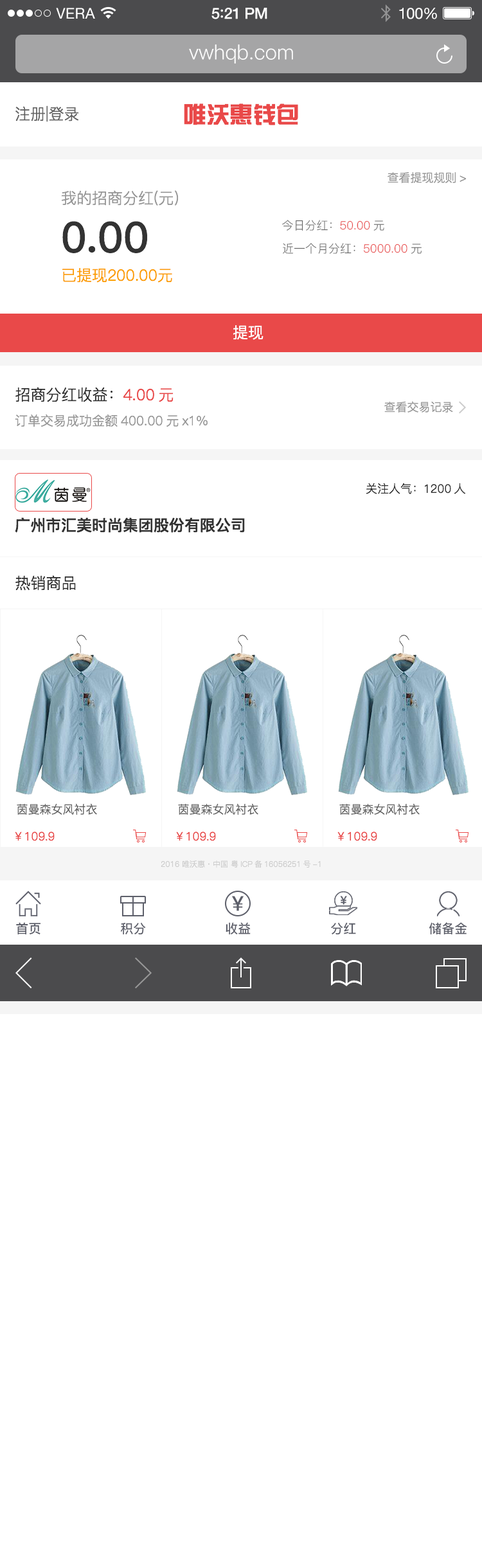
<style>
.page{position:relative;width:482px;height:1568px;background:#ffffff}
.page>*{position:absolute;margin:0}
.t1{font:14.8px "HelveticaNeue";letter-spacing:0.02em;color:#ffffff}
.t2{font:15.4px "HelveticaNeue-Medium";letter-spacing:-0.02em;color:#ffffff}
.t3{font:16.7px "Avenir-Medium";letter-spacing:-0.02em;color:#ffffff}
.t4{font:15.4px "HelveticaNeue";letter-spacing:-0.02em;color:#ffffff}
.t5{font:20.6px "PingFang-SC-Regular";color:#fefefe}
.t6{font:15.4px "PingFang-SC-Regular";color:#666666}
.t7{font:23.1px "FZZYJW--GB1-0";color:#e94949}
.t8{font:11.6px "PingFang-SC-Regular";color:#999999}
.t9{font:15.4px/51.4px "PingFang-SC-Regular";color:#fca000}
.t10{font:15.4px/25.7px "PingFang-SC-Regular";color:#999999}
.t11{font:42.4px/51.4px "PingFang-SC-Bold";color:#333333}
.t12{font:11.6px "PingFang-SC-Regular";color:#666666}
.t13{font:11.6px "PingFang-SC-Regular";color:#e94949}
.t14{font:15.4px "PingFang-SC-Regular";color:#ffffff}
.t15{font:12.9px "PingFang-SC-Regular";color:#999999}
.t16{font:15.4px "PingFang-SC-Regular";color:#333333}
.t17{font:15.4px "PingFang-SC-Regular";color:#e94949}
.t18{font:11.6px "PingFang-SC-Regular";color:#333333}
.t19{font:15.4px "PingFang-SC-Bold";color:#333333}
.t20{font:7.7px "PingFang-SC-Regular";color:#cccccc}
.t21{font:20.6px "PingFang-SC-Bold";color:#5d5f6a}
.t22{font:12.9px "PingFang-SC-Bold";color:#5d5f6a}
</style>
<div class="page">
<p class="t1" style="left:56px;top:8px;width:39px;height:11px">VERA</p>
<p class="t2" style="left:211px;top:8px;width:56px;height:11px">5<span class="t3">:</span>21 PM</p>
<p class="t4" style="left:399px;top:8px;width:38px;height:11px">100%</p>
<p class="t5" style="left:189px;top:44px;width:104px;height:20px">vwhqb.com</p>
<p class="t6" style="left:15px;top:105px;width:64px;height:17px">注册|登录</p>
<p class="t7" style="left:184px;top:103px;width:114px;height:22px">唯沃惠钱包</p>
<p class="t8" style="left:388px;top:172px;width:79px;height:11px">查看提现规则&gt;</p>
<p class="t9" style="left:61px;top:190px;width:118px;height:93px"><span class="t10">我的招商分红(元)<br></span><span class="t11">0.00<br></span>已提现200.00元</p>
<p class="t12" style="left:282px;top:220px;width:102px;height:11px">今日分红：<span class="t13">50.00</span>元</p>
<p class="t12" style="left:283px;top:243px;width:139px;height:11px">近一个月分红：<span class="t13">5000.00</span>元</p>
<p class="t14" style="left:233px;top:325px;width:30px;height:15px">提现</p>
<p class="t15" style="left:15px;top:387px;width:193px;height:40px"><span class="t16">招商分红收益：</span><span class="t17">4.00元<br></span>订单交易成功金额400.00元x1%</p>
<p class="t8" style="left:384px;top:401px;width:69px;height:12px">查看交易记录</p>
<p class="t18" style="left:366px;top:483px;width:99px;height:11px">关注人气：1200人</p>
<p class="t19" style="left:15px;top:517px;width:230px;height:16px">广州市汇美时尚集团股份有限公司</p>
<p class="t16" style="left:15px;top:575px;width:61px;height:16px">热销商品</p>
<p class="t12" style="left:17px;top:803px;width:80px;height:12px">茵曼森女风衬衣</p>
<p class="t12" style="left:178px;top:803px;width:80px;height:12px">茵曼森女风衬衣</p>
<p class="t12" style="left:339px;top:803px;width:81px;height:12px">茵曼森女风衬衣</p>
<p class="t13" style="left:15px;top:832px;width:40px;height:9px">￥109.9</p>
<p class="t13" style="left:176px;top:832px;width:40px;height:9px">￥109.9</p>
<p class="t13" style="left:337px;top:832px;width:40px;height:9px">￥109.9</p>
<p class="t20" style="left:161px;top:860px;width:160px;height:8px">2016 唯沃惠·中国 粤ICP备16056251号-1</p>
<p class="t21" style="left:232px;top:896px;width:12px;height:15px">￥</p>
<p class="t22" style="left:16px;top:922px;width:24px;height:12px">首页</p>
<p class="t22" style="left:121px;top:922px;width:25px;height:12px">积分</p>
<p class="t22" style="left:226px;top:922px;width:25px;height:12px">收益</p>
<p class="t22" style="left:331px;top:922px;width:25px;height:12px">分红</p>
<p class="t22" style="left:429px;top:922px;width:38px;height:12px">储备金</p>
</div>
